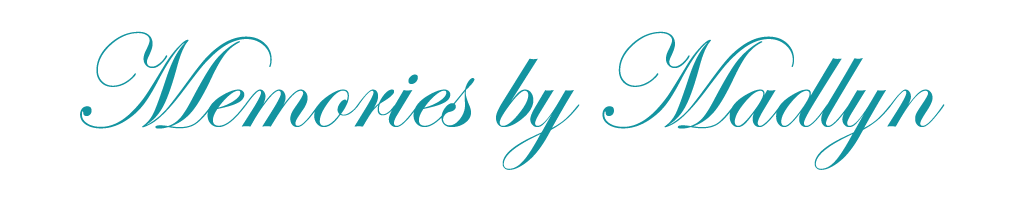
<style>
.page{position:relative;width:1024px;height:200px;background:#ffffff}
.page>*{position:absolute;margin:0}
.t1{font:135px "EdwardianScriptITC";color:#1394a0}
</style>
<div class="page">
<p class="t1" style="left:80px;top:31px;width:865px;height:139px">Memories by Madlyn</p>
</div>
